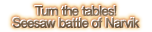
<style>
.page{position:relative;width:152px;height:32px;background:#ffffff}
.page>*{position:absolute;margin:0}
.t1{font:13px/12px "FutoGoB101Pr5-Bold";letter-spacing:-0.08em;font-weight:bold}
.t2{font:13px/12px "FutoGoB101Pr5-Bold";letter-spacing:-0.08em;color:#7c664e;font-weight:bold}
</style>
<div class="page">
<p class="t1" style="left:12px;top:5px;width:127px;height:22px;text-align:center">Turn the tables!<br>Seesaw battle of Narvik</p>
<p class="t2" style="left:13px;top:6px;width:127px;height:22px;text-align:center">Turn the tables!<br>Seesaw battle of Narvik</p>
</div>
